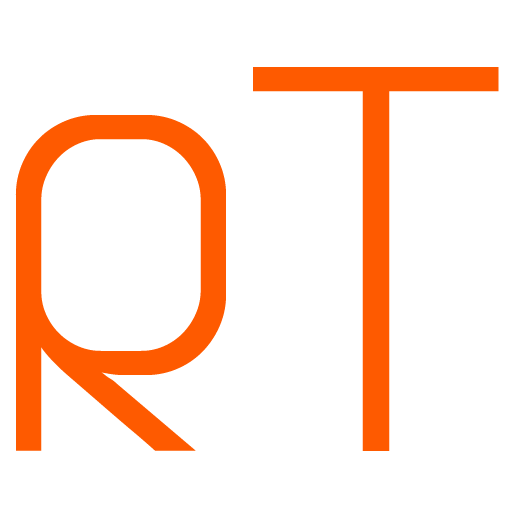
<style>
.page{position:relative;width:512px;height:512px;background:#ffffff}
.page>*{position:absolute;margin:0}
.t1{font:600px "VagebondCLight-Roman";color:#fe5a00}
</style>
<div class="page">
<p class="t1" style="left:15px;top:67px;width:484px;height:384px">rT</p>
</div>
